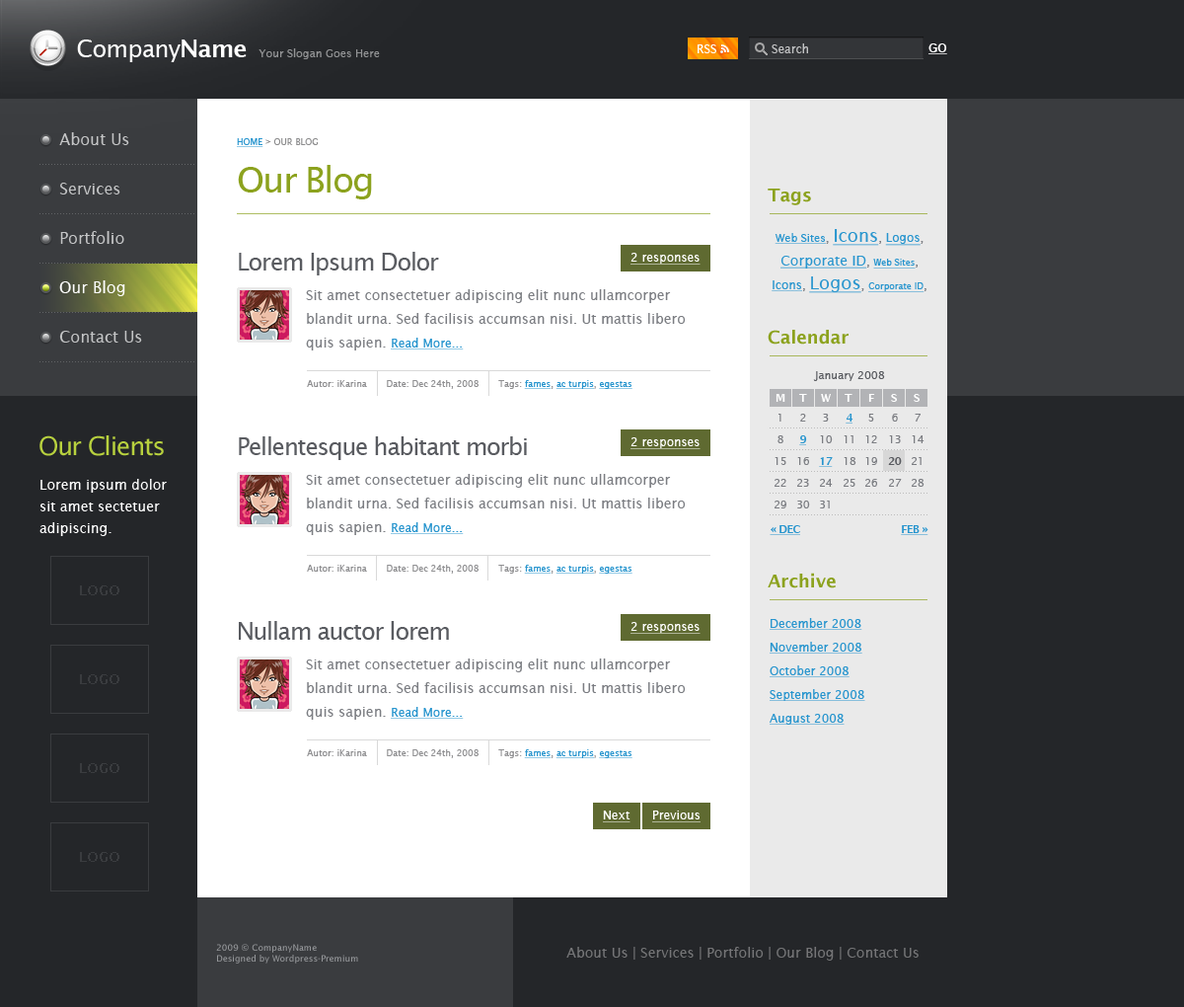
<style>
.page{position:relative;width:1184px;height:1007px;background:#ffffff}
.page>*{position:absolute;margin:0}
.t1{font:23.7px "LucidaSans";letter-spacing:-0.025em;color:#ffffff}
.t2{font:23.7px "LucidaSans-Demi";letter-spacing:-0.025em;color:#ffffff}
.t3{font:10.9px "LucidaSans";color:#929395}
.t4{font:11.8px "LucidaSans";color:#ffffff}
.t5{font:11.8px "LucidaSans";color:#c2c3c4}
.t6{font:15.8px/49.4px "LucidaSans";color:#c4c5c6}
.t7{font:8.9px "LucidaSans";color:#8d8d8e;text-transform:uppercase}
.t8{font:8.9px "LucidaSans";color:#2895ce;text-transform:uppercase;text-decoration:underline}
.t9{font:35.5px "LucidaSans";letter-spacing:-0.05em;color:#8ca21e}
.t10{font:17.8px "LucidaSans-Demi";color:#8ca21e}
.t11{font:13.8px/23.7px "LucidaSans";color:#2895ce;text-decoration:underline}
.t12{font:10.9px/23.7px "LucidaSans";color:#2895ce;text-decoration:underline}
.t13{font:11.8px/23.7px "LucidaSans";color:#7b7d82}
.t14{font:17.8px/23.7px "LucidaSans";color:#2895ce;text-decoration:underline}
.t15{font:11.8px/23.7px "LucidaSans";color:#2895ce;text-decoration:underline}
.t16{font:8.9px/23.7px "LucidaSans";color:#2895ce;text-decoration:underline}
.t17{font:13.8px/23.7px "LucidaSans";color:#7b7d82}
.t18{font:23.7px/23.7px "LucidaSans";letter-spacing:-0.05em;color:#595b60}
.t19{font:23.7px/29.6px "LucidaSans";letter-spacing:-0.05em;color:#595b60}
.t20{font:13.8px/29.6px "LucidaSans";color:#7b7d82}
.t21{font:11.8px "LucidaSans";color:#ffffff;text-decoration:underline}
.t22{font:15.8px "LucidaSans";color:#fefefe}
.t23{font:10.9px "LucidaSans";color:#595b60}
.t24{font:8.9px "LucidaSans";color:#8f8f91}
.t25{font:8.9px "LucidaSans";color:#2895ce;text-decoration:underline}
.t26{font:10.9px "LucidaSans-Demi";color:#ffffff}
.t27{font:10.9px "LucidaSans";letter-spacing:-0.05em;color:#7b7d82}
.t28{font:10.9px "LucidaSans-Demi";letter-spacing:-0.05em;color:#2895ce;text-decoration:underline}
.t29{font:25.7px "LucidaSans";letter-spacing:-0.05em;color:#b8d13e}
.t30{font:10.9px "LucidaSans-Demi";letter-spacing:-0.05em;color:#595b60}
.t31{font:13.8px/21.7px "LucidaSans";color:#ffffff}
.t32{font:8.9px "LucidaSans";color:#979798}
.t33{font:13.8px "LucidaSans";color:#757577}
</style>
<div class="page">
<p class="t1" style="left:77px;top:39px;width:170px;height:23px">Company<span class="t2">Name</span></p>
<p class="t3" style="left:259px;top:48px;width:121px;height:11px">Your Slogan Goes Here</p>
<p class="t4" style="left:698px;top:44px;width:19px;height:9px">RSS</p>
<p class="t5" style="left:772px;top:43px;width:36px;height:10px">Search</p>
<p class="t6" style="left:59px;top:132px;width:83px;height:210px">About Us<br>Services<br>Portfolio<br><br>Contact Us</p>
<p class="t7" style="left:237px;top:138px;width:82px;height:9px"><span class="t8">Home</span> &gt; Our Blog</p>
<p class="t9" style="left:238px;top:165px;width:134px;height:34px">Our Blog</p>
<p class="t10" style="left:768px;top:189px;width:43px;height:16px">Tags</p>
<p class="t11" style="left:772px;top:229px;width:155px;height:64px;text-align:center"><span class="t12">Web Sites</span><span class="t13">, </span><span class="t14">Icons</span><span class="t13">, </span><span class="t15">Logos</span><span class="t13">, <br></span>Corporate ID<span class="t13">, </span><span class="t16">Web Sites</span><span class="t13">, <br></span><span class="t15">Icons</span><span class="t13">, </span><span class="t14">Logos</span><span class="t13">, </span><span class="t16">Corporate ID</span><span class="t13">,</span></p>
<p class="t17" style="left:239px;top:252px;width:447px;height:98px"><span class="t18">Lorem Ip</span><span class="t19">sum Dolor <br></span><span class="t20">Sit amet consec</span>tetuer adipiscing elit nunc ullamcorper blandit urna. Sed facilisis accumsan nisi. Ut mattis libero quis sapien. <span class="t15">Read More...</span></p>
<p class="t21" style="left:631px;top:253px;width:70px;height:12px">2 responses</p>
<p class="t22" style="left:59px;top:280px;width:66px;height:16px">Our Blog</p>
<p class="t10" style="left:768px;top:330px;width:81px;height:14px">Calendar</p>
<p class="t23" style="left:813px;top:371px;width:72px;height:10px">January 2008</p>
<p class="t24" style="left:307px;top:380px;width:326px;height:9px">Autor: iKarina       Date: Dec 24th, 2008       Tags: <span class="t25">fames</span>, <span class="t25">ac turpis</span>, <span class="t25">egestas</span></p>
<p class="t26" style="left:776px;top:394px;width:10px;height:8px">M</p>
<p class="t26" style="left:799px;top:394px;width:8px;height:8px">T</p>
<p class="t26" style="left:821px;top:394px;width:10px;height:8px">W</p>
<p class="t26" style="left:845px;top:394px;width:8px;height:8px">T</p>
<p class="t26" style="left:869px;top:394px;width:6px;height:8px">F</p>
<p class="t26" style="left:891px;top:394px;width:6px;height:8px">S</p>
<p class="t26" style="left:914px;top:394px;width:6px;height:8px">S</p>
<p class="t27" style="left:779px;top:414px;width:3px;height:7px">1</p>
<p class="t27" style="left:800px;top:414px;width:6px;height:7px">2</p>
<p class="t27" style="left:823px;top:414px;width:6px;height:7px">3</p>
<p class="t28" style="left:846px;top:414px;width:8px;height:9px">4</p>
<p class="t27" style="left:869px;top:414px;width:6px;height:7px">5</p>
<p class="t27" style="left:892px;top:414px;width:6px;height:7px">6</p>
<p class="t27" style="left:915px;top:414px;width:6px;height:7px">7</p>
<p class="t29" style="left:39px;top:435px;width:125px;height:21px">Our Clients</p>
<p class="t17" style="left:239px;top:436px;width:447px;height:99px"><span class="t18">Pellentesque habitant morbi<br></span><span class="t20">Sit amet consec</span>tetuer adipiscing elit nunc ullamcorper blandit urna. Sed facilisis accumsan nisi. Ut mattis libero quis sapien. <span class="t15">Read More...</span></p>
<p class="t21" style="left:631px;top:437px;width:70px;height:12px">2 responses</p>
<p class="t27" style="left:778px;top:435px;width:6px;height:8px">8</p>
<p class="t28" style="left:799px;top:435px;width:8px;height:10px">9</p>
<p class="t27" style="left:820px;top:435px;width:13px;height:8px">10</p>
<p class="t27" style="left:844px;top:435px;width:10px;height:8px">11</p>
<p class="t27" style="left:866px;top:435px;width:11px;height:8px">12</p>
<p class="t27" style="left:889px;top:435px;width:12px;height:8px">13</p>
<p class="t27" style="left:912px;top:435px;width:13px;height:8px">14</p>
<p class="t27" style="left:775px;top:457px;width:12px;height:8px">15</p>
<p class="t27" style="left:798px;top:457px;width:11px;height:8px">16</p>
<p class="t28" style="left:819px;top:457px;width:14px;height:10px">17</p>
<p class="t27" style="left:844px;top:457px;width:13px;height:8px">18</p>
<p class="t27" style="left:866px;top:457px;width:11px;height:8px">19</p>
<p class="t30" style="left:888px;top:457px;width:14px;height:8px">20</p>
<p class="t27" style="left:912px;top:457px;width:10px;height:8px">21</p>
<p class="t31" style="left:39px;top:479px;width:128px;height:57px">Lorem ipsum dolor sit amet sectetuer adipiscing.</p>
<p class="t27" style="left:775px;top:479px;width:12px;height:8px">22</p>
<p class="t27" style="left:798px;top:479px;width:11px;height:8px">23</p>
<p class="t27" style="left:820px;top:479px;width:13px;height:8px">24</p>
<p class="t27" style="left:844px;top:479px;width:12px;height:8px">25</p>
<p class="t27" style="left:866px;top:479px;width:11px;height:8px">26</p>
<p class="t27" style="left:889px;top:479px;width:13px;height:8px">27</p>
<p class="t27" style="left:912px;top:479px;width:13px;height:8px">28</p>
<p class="t27" style="left:775px;top:500px;width:12px;height:8px">29</p>
<p class="t27" style="left:798px;top:500px;width:12px;height:8px">30</p>
<p class="t27" style="left:820px;top:500px;width:10px;height:8px">31</p>
<p class="t28" style="left:770px;top:525px;width:30px;height:10px">« DEC</p>
<p class="t28" style="left:901px;top:525px;width:28px;height:10px">FEB »</p>
<p class="t24" style="left:307px;top:565px;width:326px;height:8px">Autor: iKarina       Date: Dec 24th, 2008       Tags: <span class="t25">fames</span>, <span class="t25">ac turpis</span>, <span class="t25">egestas</span></p>
<p class="t10" style="left:768px;top:572px;width:68px;height:16px">Archive</p>
<p class="t15" style="left:770px;top:618px;width:96px;height:106px">December 2008<br>November 2008<br>October 2008<br>September 2008<br>August 2008</p>
<p class="t17" style="left:239px;top:621px;width:447px;height:99px"><span class="t18">Nullam auctor lorem<br></span><span class="t20">Sit amet consec</span>tetuer adipiscing elit nunc ullamcorper blandit urna. Sed facilisis accumsan nisi. Ut mattis libero quis sapien. <span class="t15">Read More...</span></p>
<p class="t21" style="left:631px;top:622px;width:70px;height:12px">2 responses</p>
<p class="t24" style="left:307px;top:749px;width:326px;height:9px">Autor: iKarina       Date: Dec 24th, 2008       Tags: <span class="t25">fames</span>, <span class="t25">ac turpis</span>, <span class="t25">egestas</span></p>
<p class="t21" style="left:603px;top:810px;width:28px;height:12px">Next</p>
<p class="t21" style="left:652px;top:810px;width:49px;height:12px">Previous</p>
<p class="t32" style="left:216px;top:944px;width:142px;height:19px">2009 © CompanyName<br>Designed by Wordpress-Premium</p>
<p class="t33" style="left:567px;top:947px;width:352px;height:13px">About Us | Services | Portfolio | Our Blog | Contact Us</p>
</div>
